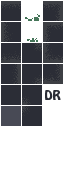
<style>
.page{position:relative;width:65px;height:191px;background:#ffffff}
.page>*{position:absolute;margin:0}
.t1{font:12px "HoboStd";color:#2b2d36}
</style>
<div class="page">
<p class="t1" style="left:45px;top:90px;width:16px;height:10px">DR</p>
</div>
